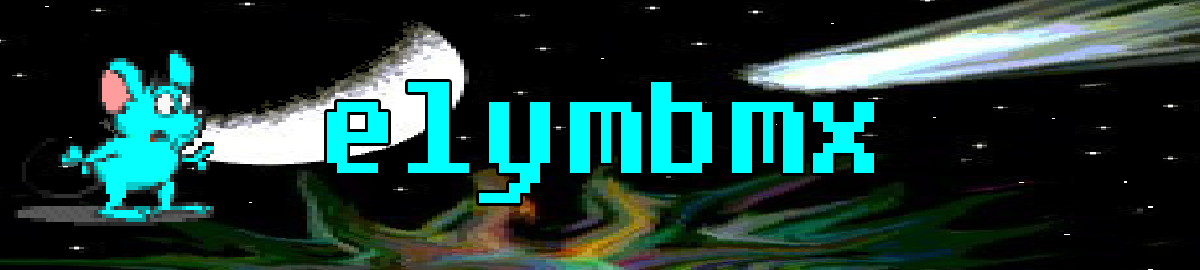
<style>
.page{position:relative;width:1200px;height:270px;background:#000000}
.page>*{position:absolute;margin:0}
.t1{font:130px "Fixedsys";color:#00ffff}
</style>
<div class="page">
<p class="t1" style="left:327px;top:82px;width:547px;height:121px">elymbmx</p>
</div>
